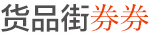
<style>
.page{position:relative;width:149px;height:36px;background:#ffffff}
.page>*{position:absolute;margin:0}
.t1{font:30px "FZLTZHK--GBK1-0";color:#504e4e}
.t2{font:30px "YuMin-Medium";color:#ed3f00}
</style>
<div class="page">
<p class="t1" style="left:1px;top:3px;width:89px;height:29px">货品街</p>
<p class="t2" style="left:90px;top:4px;width:59px;height:28px">券券</p>
</div>
